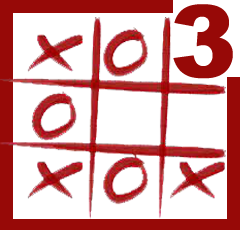
<style>
.page{position:relative;width:240px;height:230px;background:#ffffff}
.page>*{position:absolute;margin:0}
.t1{font:100px "Arial-Black";color:#970907}
</style>
<div class="page">
<p class="t1" style="left:173px;top:4px;width:60px;height:75px">3</p>
</div>
